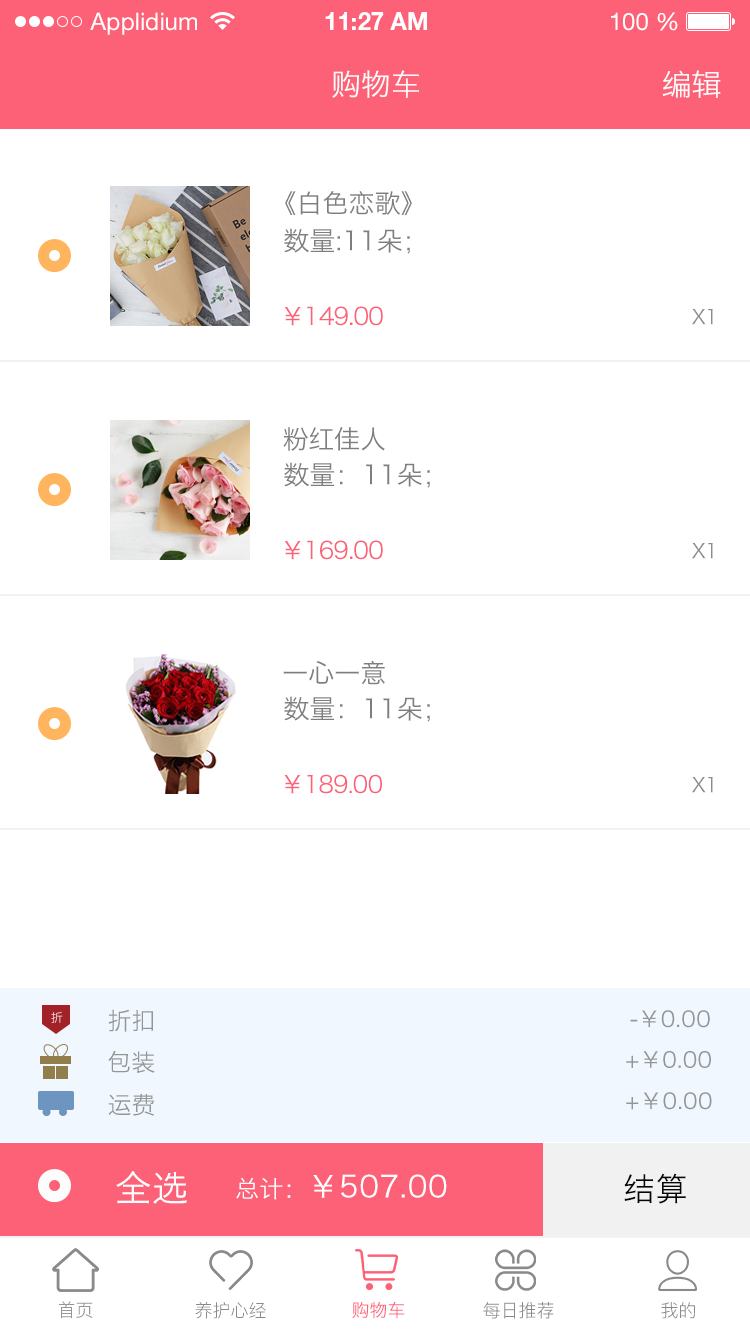
<style>
.page{position:relative;width:750px;height:1334px;background:#ffffff}
.page>*{position:absolute;margin:0}
.t1{font:24px "HelveticaNeueLTStd-Roman";color:#ffffff}
.t2{font:24px "HelveticaNeueLTStd-Bd";color:#ffffff}
.t3{font:30px "HiraginoSansGB-W3";color:#fbfbfb}
.t4{font:26px "HiraginoSansGB-W3";color:#7e7e7e}
.t5{font:24px "HiraginoSansGB-W3";letter-spacing:-0.04em;color:#fc6177}
.t6{font:20px "HiraginoSansGB-W3";letter-spacing:-0.04em;color:#8a8c8d}
.t7{font:23.8px "HiraginoSansGB-W3";letter-spacing:-0.04em;color:#fc6177}
.t8{font:12px "HiraginoSansGB-W3";color:#edd5d7}
.t9{font:24px "HiraginoSansGB-W3";color:#949595}
.t10{font:22px "HiraginoSansGB-W3";letter-spacing:0.02em;color:#949595}
.t11{font:36px "HiraginoSansGB-W3";letter-spacing:0.02em;color:#ffffff}
.t12{font:30px "HiraginoSansGB-W3";letter-spacing:0.02em;color:#ffffff}
.t13{font:24px "HiraginoSansGB-W3";letter-spacing:0.02em;color:#ffffff}
.t14{font:32px "HiraginoSansGB-W3";letter-spacing:0.02em;color:#050505}
.t15{font:18px "HiraginoSansGB-W3";color:#979797}
.t16{font:18px "PingFang-SC-Regular";color:#8a8a8a}
.t17{font:18px "HiraginoSansGB-W3";color:#fc6177}
</style>
<div class="page">
<p class="t1" style="left:90px;top:12px;width:107px;height:23px">Applidium</p>
<p class="t2" style="left:325px;top:12px;width:102px;height:18px">11:27 AM</p>
<p class="t1" style="left:611px;top:12px;width:67px;height:19px">100 %</p>
<p class="t3" style="left:332px;top:70px;width:87px;height:28px">购物车</p>
<p class="t3" style="left:662px;top:70px;width:59px;height:28px">编辑</p>
<p class="t4" style="left:285px;top:191px;width:127px;height:25px">《白色恋歌》</p>
<p class="t4" style="left:284px;top:228px;width:126px;height:26px">数量:11朵；</p>
<p class="t5" style="left:284px;top:306px;width:99px;height:20px">￥149.00</p>
<p class="t6" style="left:692px;top:309px;width:21px;height:16px">X1</p>
<p class="t4" style="left:283px;top:427px;width:102px;height:24px">粉红佳人</p>
<p class="t4" style="left:284px;top:462px;width:146px;height:26px">数量：11朵；</p>
<p class="t5" style="left:284px;top:540px;width:99px;height:20px">￥169.00</p>
<p class="t6" style="left:692px;top:543px;width:21px;height:16px">X1</p>
<p class="t4" style="left:283px;top:660px;width:102px;height:25px">一心一意</p>
<p class="t4" style="left:284px;top:696px;width:146px;height:26px">数量：11朵；</p>
<p class="t7" style="left:284px;top:774px;width:98px;height:20px">￥189.00</p>
<p class="t6" style="left:692px;top:777px;width:21px;height:16px">X1</p>
<p class="t8" style="left:51px;top:1011px;width:12px;height:12px">折</p>
<p class="t9" style="left:108px;top:1009px;width:46px;height:23px">折扣</p>
<p class="t10" style="left:630px;top:1010px;width:80px;height:18px">-￥0.00</p>
<p class="t9" style="left:108px;top:1051px;width:47px;height:22px">包装</p>
<p class="t10" style="left:626px;top:1051px;width:85px;height:17px">+￥0.00</p>
<p class="t9" style="left:108px;top:1093px;width:46px;height:23px">运费</p>
<p class="t10" style="left:626px;top:1092px;width:86px;height:18px">+￥0.00</p>
<p class="t11" style="left:116px;top:1170px;width:71px;height:34px">全选</p>
<p class="t12" style="left:236px;top:1174px;width:211px;height:26px"><span class="t13">总计：</span>￥507.00</p>
<p class="t14" style="left:624px;top:1173px;width:62px;height:31px">结算</p>
<p class="t15" style="left:58px;top:1301px;width:35px;height:18px">首页</p>
<p class="t16" style="left:195px;top:1302px;width:71px;height:17px">养护心经</p>
<p class="t17" style="left:352px;top:1301px;width:53px;height:18px">购物车</p>
<p class="t16" style="left:483px;top:1302px;width:71px;height:17px">每日推荐</p>
<p class="t16" style="left:661px;top:1302px;width:34px;height:17px">我的</p>
</div>
